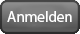
<style>
.page{position:relative;width:80px;height:34px}
.page>*{position:absolute;margin:0}
.t1{font:12px "MyriadPro-Regular";color:#ffffff}
</style>
<div class="page">
<p class="t1" style="left:7px;top:11px;width:65px;height:11px">Anmelden</p>
</div>
